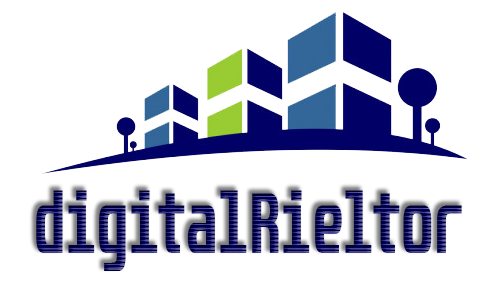
<style>
.page{position:relative;width:486px;height:281px;background:#ffffff}
.page>*{position:absolute;margin:0}
.t1{font:72px "Unispace-Bold";letter-spacing:0.05em;font-weight:bold;scale:0.67 1}
</style>
<div class="page">
<p class="t1" style="left:36px;top:190px;width:426px;height:81px">digitalRieltor</p>
</div>
